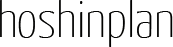
<style>
.page{position:relative;width:173px;height:47px;background:#ffffff}
.page>*{position:absolute;margin:0}
.t1{font:50px "YanoneKaffeesatz-Thin";color:#010100}
</style>
<div class="page">
<p class="t1" style="left:0px;top:0px;width:173px;height:47px">hoshinplan</p>
</div>
